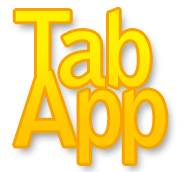
<style>
.page{position:relative;width:184px;height:172px;background:#ffffff}
.page>*{position:absolute;margin:0}
.t1{font:100px/60px "BellGothicStd-Bold";letter-spacing:-0.075em;color:#ffd701;font-weight:bold}
</style>
<div class="page">
<p class="t1" style="left:15px;top:9px;width:151px;height:154px">Tab<br>App</p>
</div>
